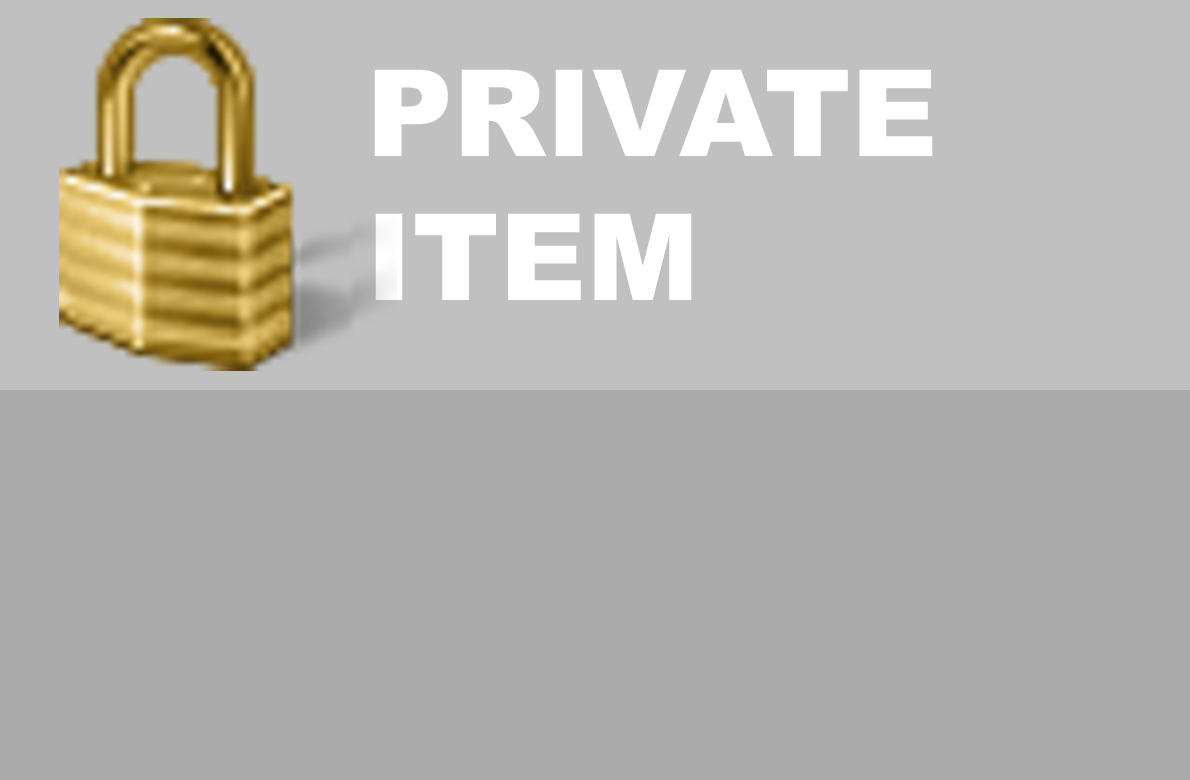
<style>
.page{position:relative;width:1190px;height:780px;background:#aaaaaa}
.page>*{position:absolute;margin:0}
.t1{font:120px "Arial-Black";color:#ffffff}
</style>
<div class="page">
<p class="t1" style="left:374px;top:69px;width:559px;height:231px">PRIVATE<br>ITEM</p>
</div>
